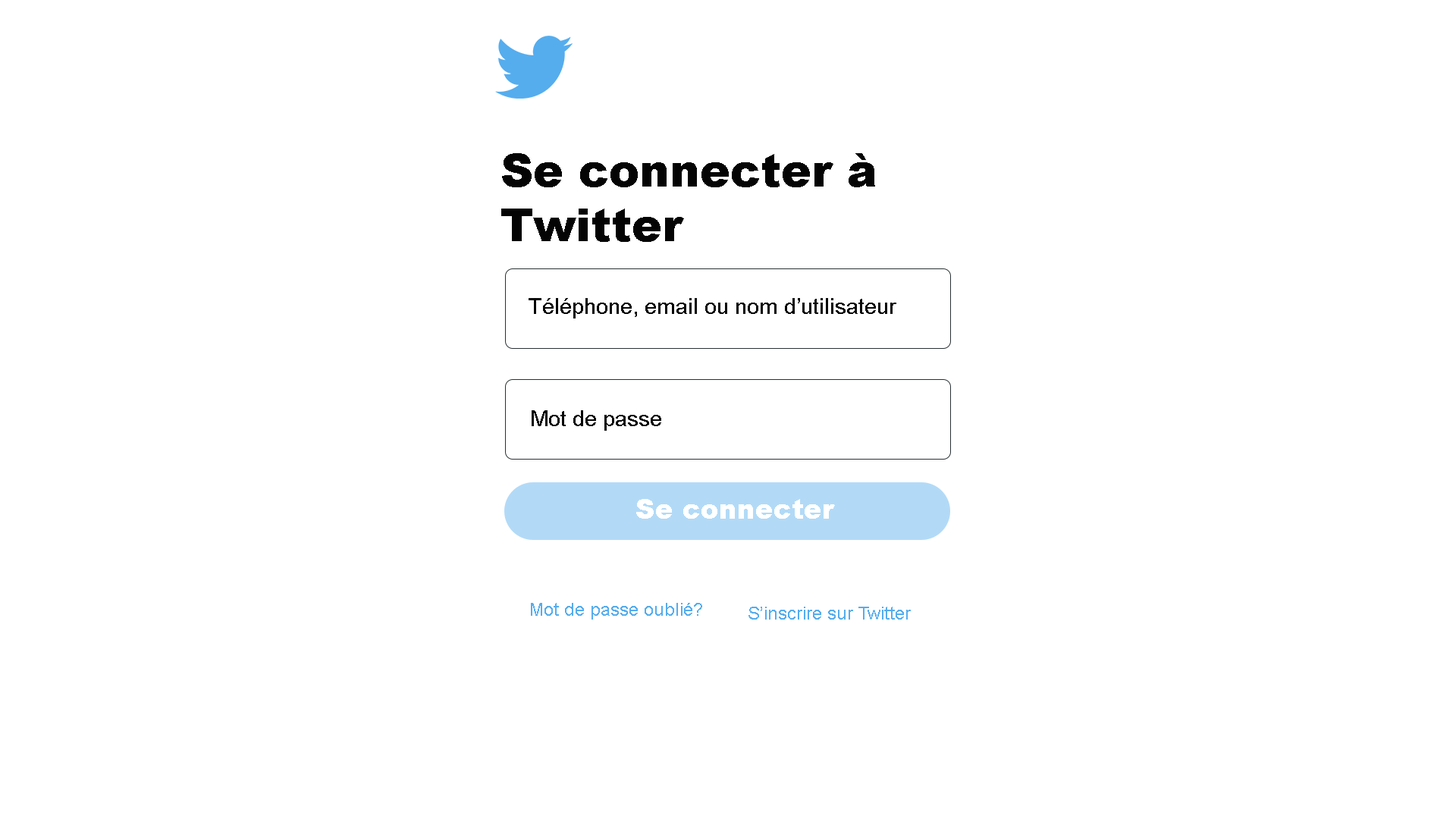
<style>
.page{position:relative;width:1456px;height:819px;background:#ffffff}
.page>*{position:absolute;margin:0}
.t1{font:45.5px "Arial-Black";color:#040404}
.t2{font:22px "ArialMT";color:#070707}
.t3{font:27.3px "Arial-Black";color:#ffffff}
.t4{font:18.2px "ArialMT";color:#55adee}
</style>
<div class="page">
<p class="t1" style="left:501px;top:153px;width:374px;height:89px">Se connecter à<br>Twitter</p>
<p class="t2" style="left:529px;top:298px;width:367px;height:20px">Téléphone, email ou nom d’utilisateur</p>
<p class="t2" style="left:532px;top:410px;width:129px;height:21px">Mot de passe</p>
<p class="t3" style="left:636px;top:499px;width:199px;height:20px">Se connecter</p>
<p class="t4" style="left:531px;top:603px;width:171px;height:17px">Mot de passe oublié?</p>
<p class="t4" style="left:748px;top:607px;width:163px;height:13px">S’inscrire sur Twitter</p>
</div>
